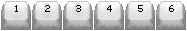
<style>
.page{position:relative;width:187px;height:31px}
.page>*{position:absolute;margin:0}
.t1{font:8.5px "Terminal";color:#000000}
</style>
<div class="page">
<p class="t1" style="left:15px;top:5px;width:3px;height:7px">1</p>
<p class="t1" style="left:45px;top:5px;width:5px;height:7px">2</p>
<p class="t1" style="left:76px;top:5px;width:5px;height:7px">3</p>
<p class="t1" style="left:107px;top:5px;width:5px;height:7px">4</p>
<p class="t1" style="left:138px;top:5px;width:5px;height:7px">5</p>
<p class="t1" style="left:169px;top:5px;width:5px;height:7px">6</p>
</div>
